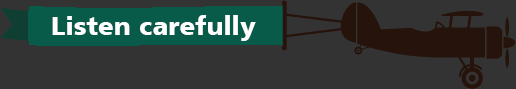
<style>
.page{position:relative;width:516px;height:89px;background:#333333}
.page>*{position:absolute;margin:0}
.t1{font:26px "Humanist777BT-BlackB";color:#ffffff}
</style>
<div class="page">
<p class="t1" style="left:52px;top:15px;width:204px;height:26px">Listen carefully</p>
</div>
